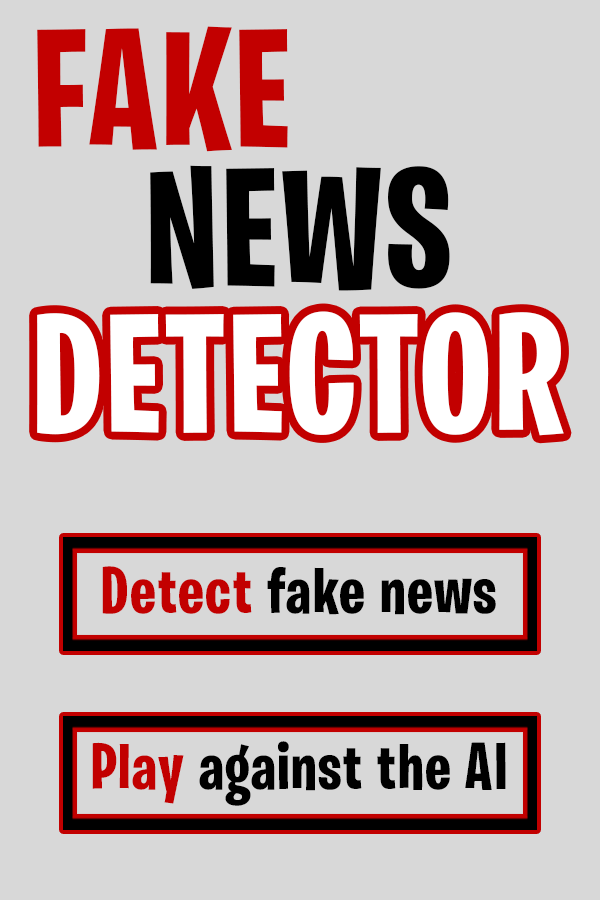
<style>
.page{position:relative;width:600px;height:900px;background:#d8d8d8}
.page>*{position:absolute;margin:0}
.t1{font:168.9px "BurbankBigCondensed-Bold";letter-spacing:0.025em;color:#c20000}
.t2{font:168.9px "BurbankBigCondensed-Bold";letter-spacing:0.025em;color:#000000}
.t3{font:168.9px "BurbankBigCondensed-Bold";letter-spacing:0.025em;color:#ffffff}
.t4{font:66.4px "BurbankBigCondensed-Bold";letter-spacing:0.025em;color:#c20000}
.t5{font:66.4px "BurbankBigCondensed-Bold";letter-spacing:0.025em}
.t6{font:66.4px "BurbankBigCondensed-Bold";letter-spacing:0.025em;color:#000000}
.t7{font:66.4px "BurbankBigCondensed-Bold";letter-spacing:0.025em;color:#d8d8d8}
</style>
<div class="page">
<p class="t1" style="left:37px;top:26px;width:251px;height:126px">FAKE</p>
<p class="t2" style="left:150px;top:165px;width:300px;height:126px">NEWS</p>
<p class="t3" style="left:37px;top:311px;width:527px;height:125px">DETECTOR</p>
<p class="t4" style="left:102px;top:566px;width:150px;height:48px">Detect</p>
<p class="t5" style="left:103px;top:566px;width:393px;height:49px">Detect fake news</p>
<p class="t6" style="left:92px;top:741px;width:414px;height:65px"><span class="t7">Play</span> against the AI</p>
<p class="t4" style="left:92px;top:742px;width:92px;height:62px">Play</p>
</div>
